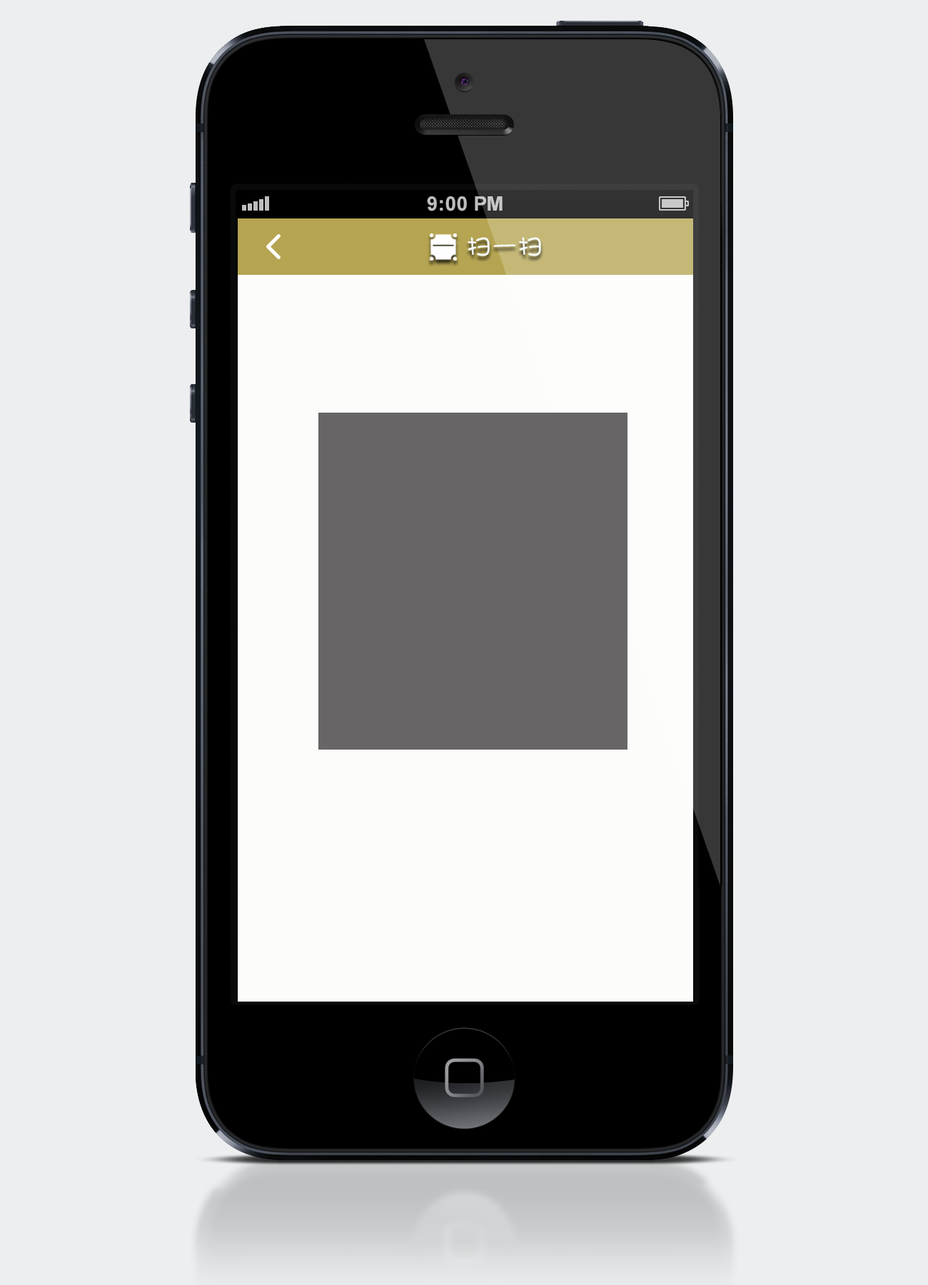
<style>
.page{position:relative;width:928px;height:1285px;background:#eceeef}
.page>*{position:absolute;margin:0}
.t1{font:25.7px "DFPShaoNvW5";letter-spacing:0.01em;color:#f5faf6}
</style>
<div class="page">
<p class="t1" style="left:468px;top:237px;width:73px;height:19px">扫一扫</p>
</div>
